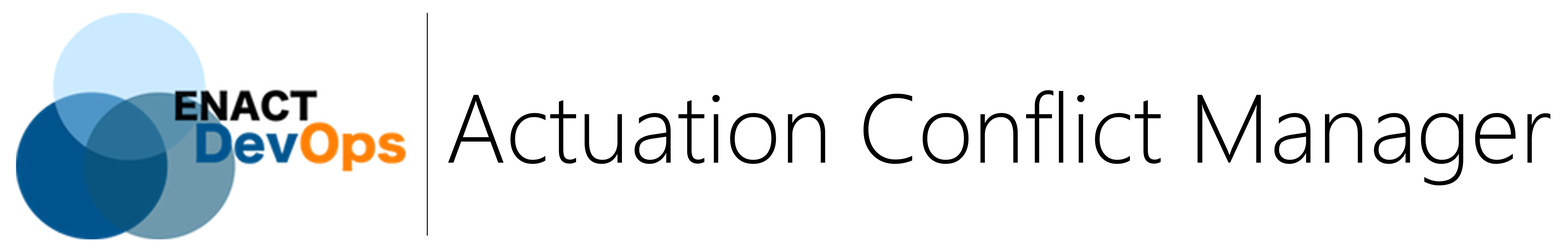
<style>
.page{position:relative;width:1568px;height:251px;background:#ffffff}
.page>*{position:absolute;margin:0}
.t1{font:96.7px "SegoeUI-Light";color:#000000}
</style>
<div class="page">
<p class="t1" style="left:448px;top:90px;width:1102px;height:95px">Actuation Conflict Manager</p>
</div>
